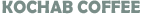
<style>
.page{position:relative;width:142px;height:14px;background:#798d88}
.page>*{position:absolute;margin:0}
.t1{font:17.6px "BerlinSansFBDemi-Bold";color:#798d88;text-transform:uppercase}
</style>
<div class="page">
<p class="t1" style="left:2px;top:0px;width:138px;height:14px">kochab coffee</p>
</div>
